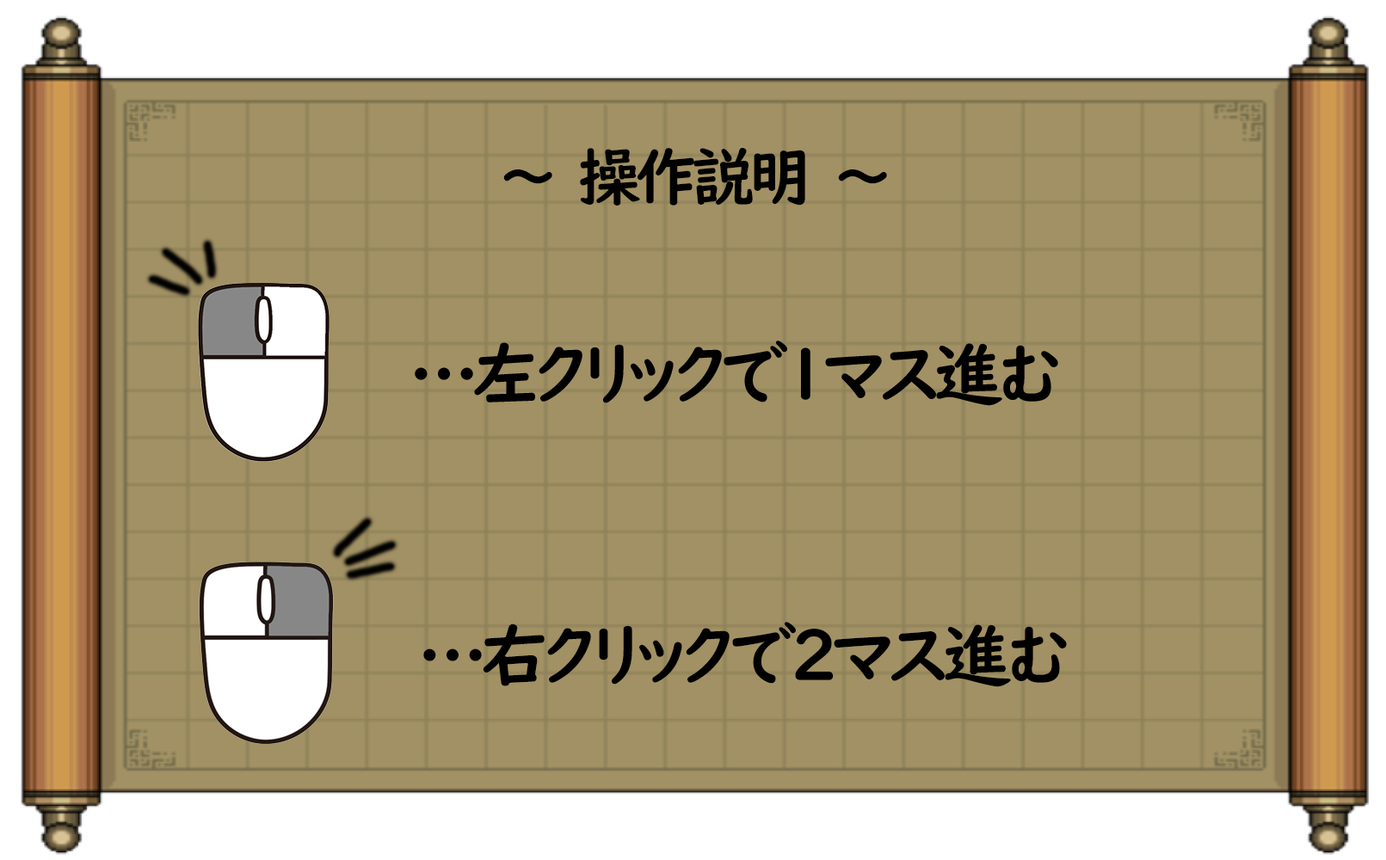
<style>
.page{position:relative;width:1386px;height:860px;background:#a29164}
.page>*{position:absolute;margin:0}
.t1{font:63.1px "UDDigiKyokashoNK-B";letter-spacing:-0.1em;color:#010101}
.t2{font:68.8px "UDDigiKyokashoNK-B";letter-spacing:-0.1em;color:#000000}
</style>
<div class="page">
<p class="t1" style="left:503px;top:148px;width:384px;height:58px">～　操作説明　～</p>
<p class="t2" style="left:423px;top:622px;width:644px;height:65px">…右クリックで2マス進む</p>
</div>
